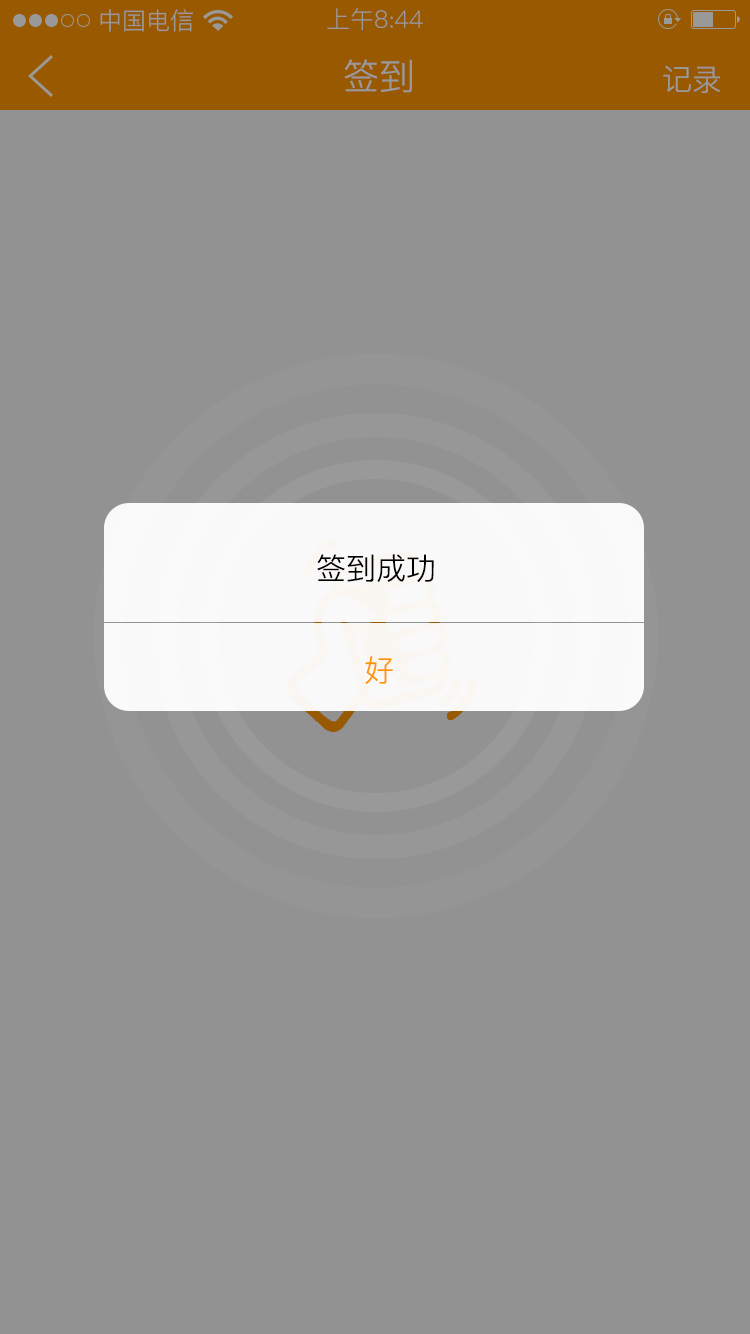
<style>
.page{position:relative;width:750px;height:1334px;background:#929292}
.page>*{position:absolute;margin:0}
.t1{font:24px "PingFang-SC-Regular";color:#999999}
.t2{font:36px "PingFang-SC-Regular";color:#999999}
.t3{font:30px "PingFang-SC-Regular";color:#999999}
.t4{font:30px "PingFang-SC-Regular";color:#000000}
.t5{font:30px "PingFang-SC-Regular";color:#ff9500}
</style>
<div class="page">
<p class="t1" style="left:100px;top:9px;width:94px;height:23px">中国电信</p>
<p class="t1" style="left:327px;top:8px;width:96px;height:23px">上午8:44</p>
<p class="t2" style="left:344px;top:59px;width:68px;height:34px">签到</p>
<p class="t3" style="left:663px;top:65px;width:57px;height:28px">记录</p>
<p class="t4" style="left:317px;top:554px;width:117px;height:28px">签到成功</p>
<p class="t5" style="left:365px;top:656px;width:28px;height:29px">好</p>
</div>
